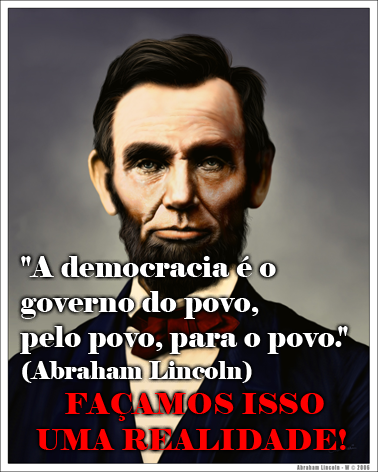
<style>
.page{position:relative;width:378px;height:472px}
.page>*{position:absolute;margin:0}
.t1{font:29.4px "Elephant-Regular";color:#ffffff}
.t2{font:24px/32px "Elephant-Regular";color:#ffffff}
.t3{font:29.4px "Elephant-Regular";color:#ff0000}
</style>
<div class="page">
<p class="t1" style="left:20px;top:256px;width:328px;height:194px">"A democracia é o<br>governo do povo,<br>pelo povo, para o povo."<br><span class="t2">(Abraham Lincoln)<br> </span><span class="t3">FAÇAMOS ISSO<br>  UMA REALIDADE!</span></p>
</div>
